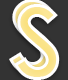
<style>
.page{position:relative;width:68px;height:80px;background:#333333}
.page>*{position:absolute;margin:0}
.t1{font:100px "CenturyGothic-Bold"}
</style>
<div class="page">
<p class="t1" style="left:9px;top:0px;width:46px;height:75px">S</p>
<p class="t1" style="left:14px;top:4px;width:46px;height:76px">S</p>
</div>
